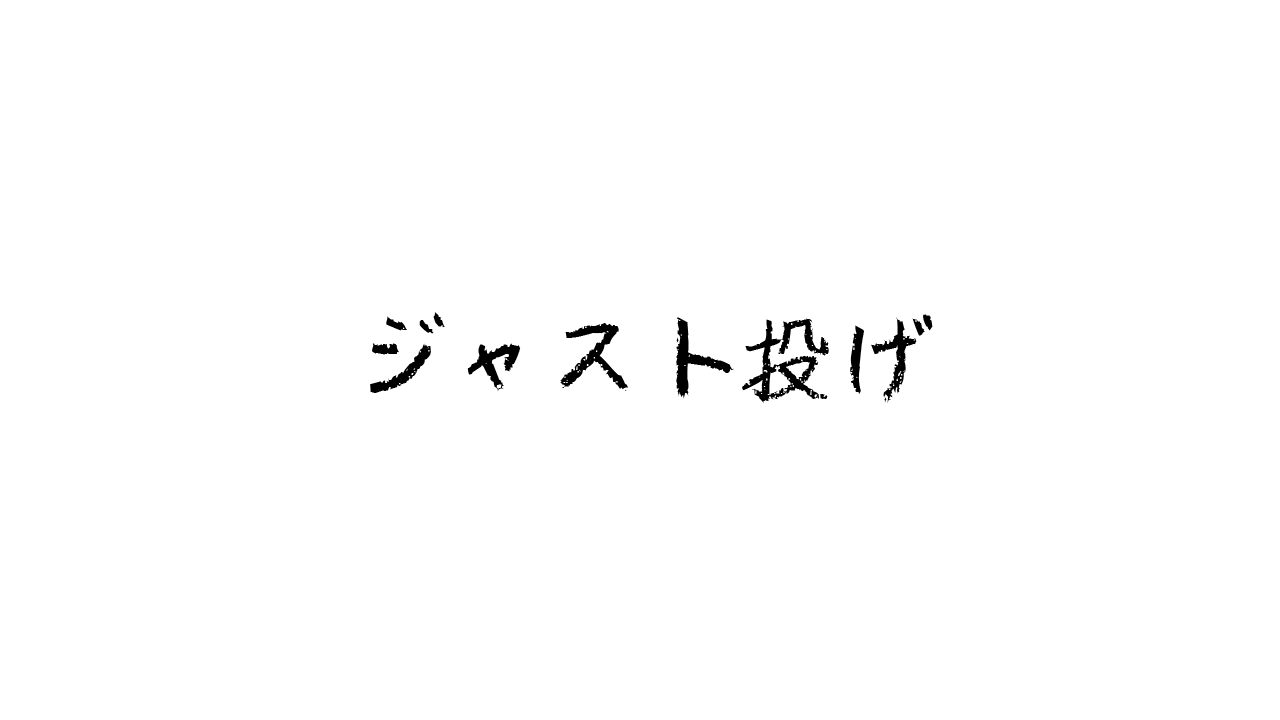
<style>
.page{position:relative;width:1280px;height:720px;background:#ffffff}
.page>*{position:absolute;margin:0}
.t1{font:91.7px "AB-chalk";letter-spacing:0.06em;color:#000000}
</style>
<div class="page">
<p class="t1" style="left:370px;top:312px;width:563px;height:91px">ジャスト投げ</p>
</div>
